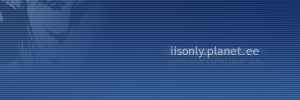
<style>
.page{position:relative;width:300px;height:100px}
.page>*{position:absolute;margin:0}
.t1{font:12px "TrebuchetMS";color:#a2b0c8}
</style>
<div class="page">
<p class="t1" style="left:170px;top:46px;width:89px;height:12px">iisonly.planet.ee</p>
</div>
